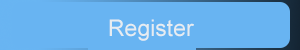
<style>
.page{position:relative;width:300px;height:50px;background:#68b4f2}
.page>*{position:absolute;margin:0}
.t1{font:23px "ArialMT";color:#e6ecf1}
</style>
<div class="page">
<p class="t1" style="left:109px;top:19px;width:85px;height:22px">Register</p>
</div>
